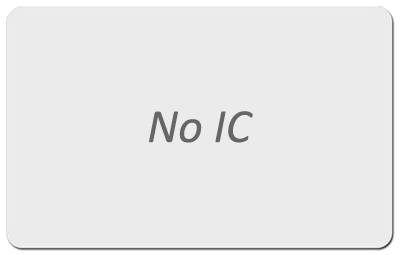
<style>
.page{position:relative;width:400px;height:255px;background:#ebebeb}
.page>*{position:absolute;margin:0}
.t1{font:48px "Calibri-Italic";color:#666666}
</style>
<div class="page">
<p class="t1" style="left:149px;top:111px;width:104px;height:32px">No IC</p>
</div>
